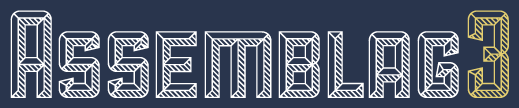
<style>
.page{position:relative;width:519px;height:108px;background:#29354d}
.page>*{position:absolute;margin:0}
.t1{font:125px "Sullivan-Regular";color:#ffffff}
.t2{font:125px "Sullivan-Regular";color:#e3ce70}
</style>
<div class="page">
<p class="t1" style="left:10px;top:10px;width:499px;height:88px">Assemblag<span class="t2">3</span></p>
</div>
